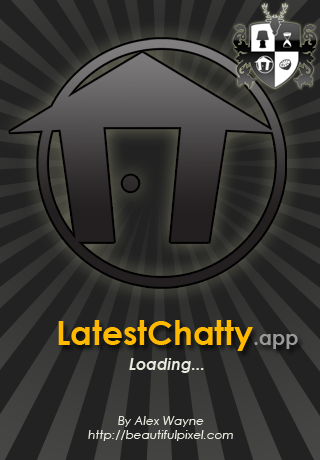
<style>
.page{position:relative;width:320px;height:460px;background:#222222}
.page>*{position:absolute;margin:0}
.t1{font:32.9px "CenturyGothic-Bold";color:#ffba00}
.t2{font:19.9px "CenturyGothic-Bold";color:#999999}
.t3{font:16px "CenturyGothic-BoldItalic";color:#e9e9de}
.t4{font:12px "CenturyGothic-Italic";color:#e9e9de}
</style>
<div class="page">
<p class="t1" style="left:58px;top:320px;width:240px;height:31px">LatestChatty<span class="t2">.app</span></p>
<p class="t3" style="left:129px;top:358px;width:75px;height:15px">Loading...</p>
<p class="t4" style="left:88px;top:416px;width:145px;height:25px;text-align:center">By Alex Wayne<br>http://beautifulpixel.com</p>
</div>
